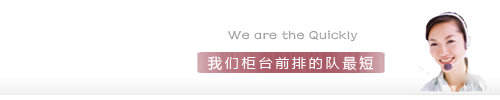
<style>
.page{position:relative;width:500px;height:100px;background:#ffffff}
.page>*{position:absolute;margin:0}
.t1{font:14px "FZSTJW--GB1-0";letter-spacing:0.05em;color:#999999}
.t2{font:14px "MicrosoftYaHei";letter-spacing:0.2em;color:#ffffff}
</style>
<div class="page">
<p class="t1" style="left:228px;top:30px;width:130px;height:12px">We are the Quickly</p>
<p class="t2" style="left:207px;top:56px;width:167px;height:15px">我们柜台前排的队最短</p>
</div>
